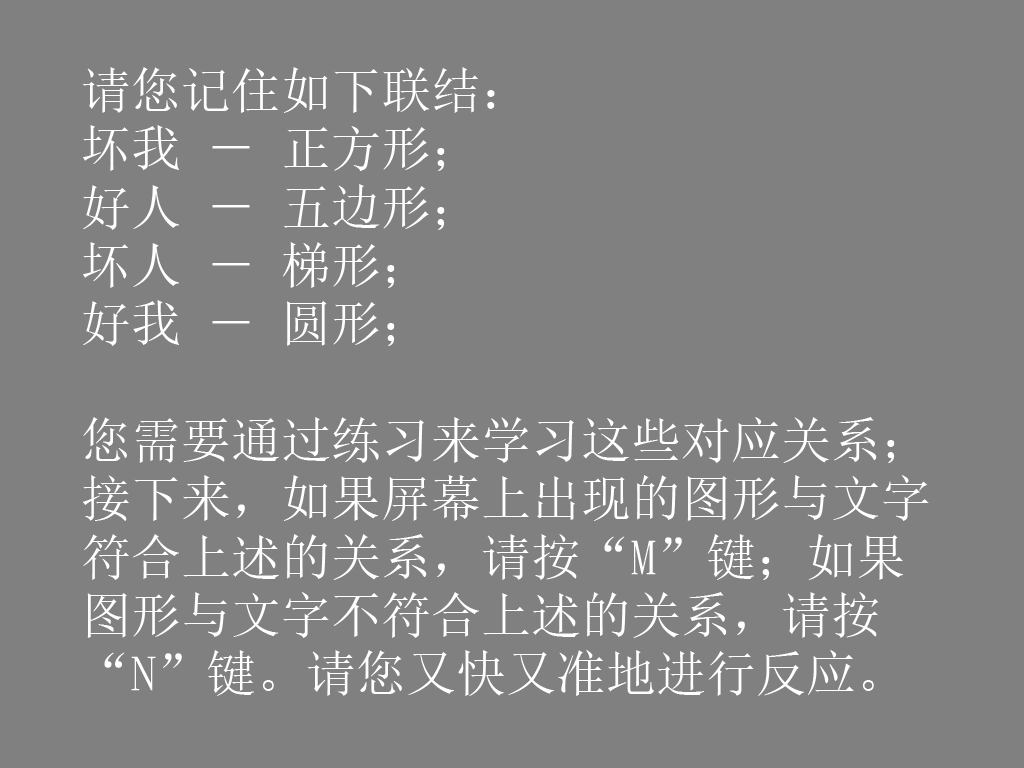
<style>
.page{position:relative;width:1024px;height:768px;background:#808080}
.page>*{position:absolute;margin:0}
.t1{font:50px/58.3px "SimSun";color:#ffffff}
</style>
<div class="page">
<p class="t1" style="left:82px;top:67px;width:847px;height:629px">请您记住如下联结： <br>坏我 － 正方形；<br>好人 － 五边形；<br>坏人 － 梯形；<br>好我 － 圆形；<br><br>您需要通过练习来学习这些对应关系；<br>接下来，如果屏幕上出现的图形与文字<br>符合上述的关系，请按“M”键；如果<br>图形与文字不符合上述的关系，请按<br>“N”键。请您又快又准地进行反应。</p>
</div>
